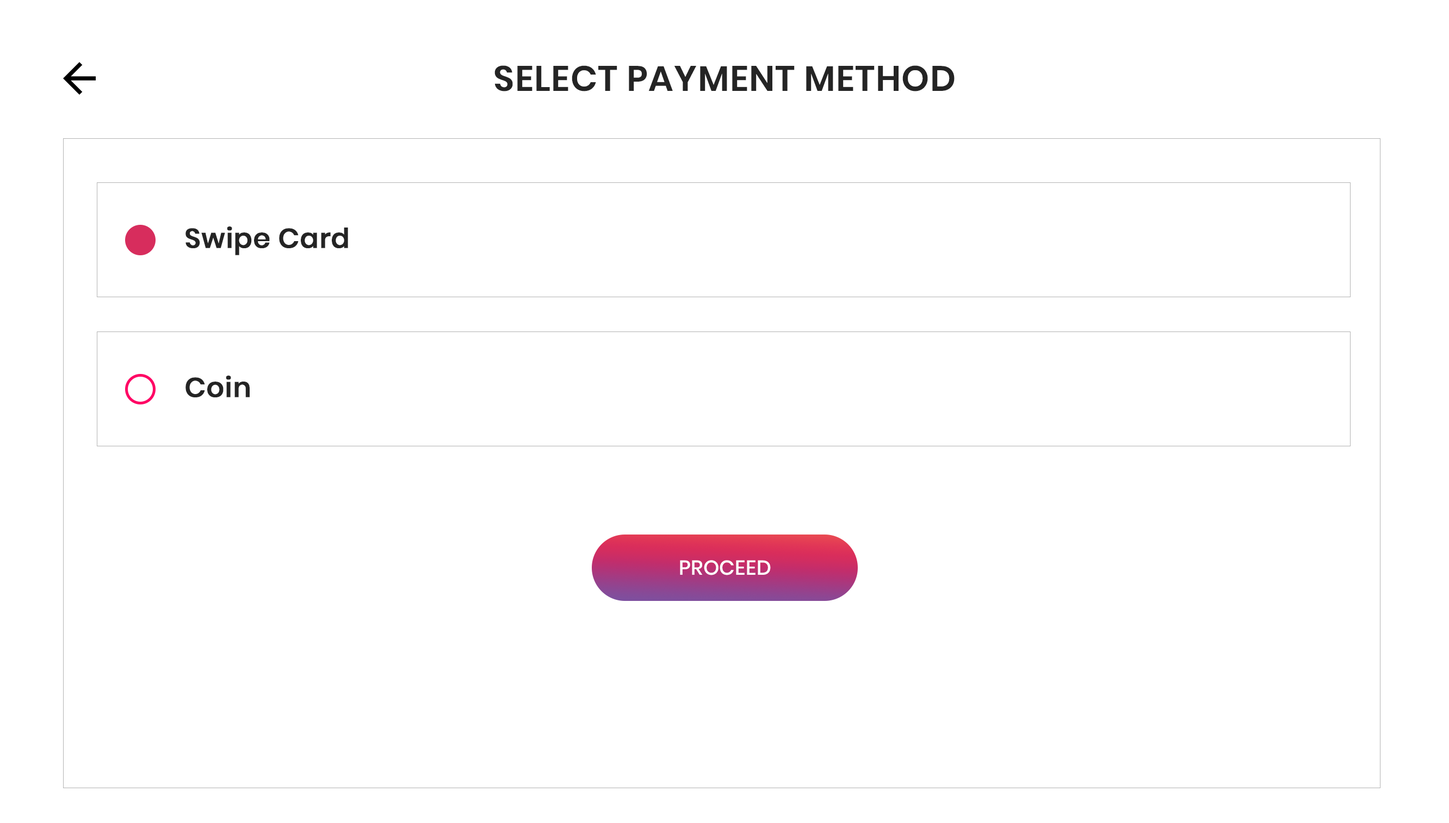
<style>
.page{position:relative;width:1449px;height:823px;background:#ffffff}
.page>*{position:absolute;margin:0}
.t1{font:35.4px "Poppins-SemiBold";letter-spacing:0.02em;color:#242424;text-transform:uppercase}
.t2{font:27.2px "Poppins-Medium";letter-spacing:0.01em;color:#242424;font-weight:bold}
.t3{font:20.3px "Poppins-Medium";letter-spacing:0.01em;color:#ffffff;text-transform:uppercase}
</style>
<div class="page">
<p class="t1" style="left:495px;top:65px;width:460px;height:26px">Select payment method</p>
<p class="t2" style="left:186px;top:226px;width:162px;height:29px">Swipe Card</p>
<p class="t2" style="left:186px;top:375px;width:64px;height:22px">Coin</p>
<p class="t3" style="left:680px;top:560px;width:91px;height:15px">Proceed</p>
</div>
